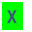
<style>
.page{position:relative;width:32px;height:32px;background:#00ff00}
.page>*{position:absolute;margin:0}
.t1{font:16px "AdobeHeitiStd-Regular";color:#365a72;font-weight:bold}
</style>
<div class="page">
<p class="t1" style="left:7px;top:10px;width:10px;height:14px">X</p>
</div>
